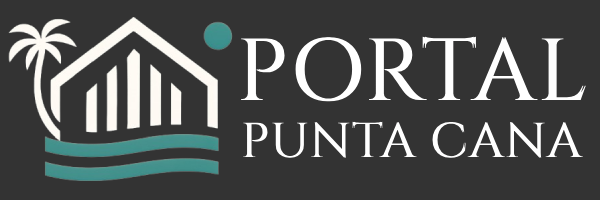
<style>
.page{position:relative;width:600px;height:200px;background:#333333}
.page>*{position:absolute;margin:0}
.t1{font:88px "Cinzel-Regular";color:#ffffff;font-weight:bold}
.t2{font:49px "Cinzel-Regular";color:#ffffff;font-weight:bold}
</style>
<div class="page">
<p class="t1" style="left:241px;top:36px;width:345px;height:66px">PORTAL</p>
<p class="t2" style="left:243px;top:121px;width:340px;height:37px">PUNTA CANA</p>
</div>
